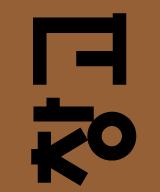
<style>
.page{position:relative;width:160px;height:192px;background:#956036}
.page>*{position:absolute;margin:0}
.t1{font:112.3px "HaanYHeadM";color:#000000}
</style>
<div class="page">
<p class="t1" style="left:31px;top:13px;width:106px;height:173px;rotate:-90deg">창고</p>
</div>
